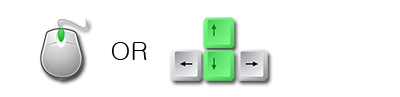
<style>
.page{position:relative;width:400px;height:97px;background:#ffffff}
.page>*{position:absolute;margin:0}
.t1{font:25.7px "Gulim";color:#000000}
</style>
<div class="page">
<p class="t1" style="left:111px;top:42px;width:36px;height:18px">OR</p>
</div>
